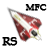
<style>
.page{position:relative;width:48px;height:48px;background:#ffffff}
.page>*{position:absolute;margin:0}
.t1{font:9px "BookAntiqua";color:#000000;font-weight:bold}
.t2{font:12px "BookAntiqua";color:#000000;font-weight:bold}
</style>
<div class="page">
<p class="t1" style="left:25px;top:4px;width:22px;height:7px">MFC</p>
<p class="t2" style="left:2px;top:37px;width:16px;height:9px">RS</p>
</div>
